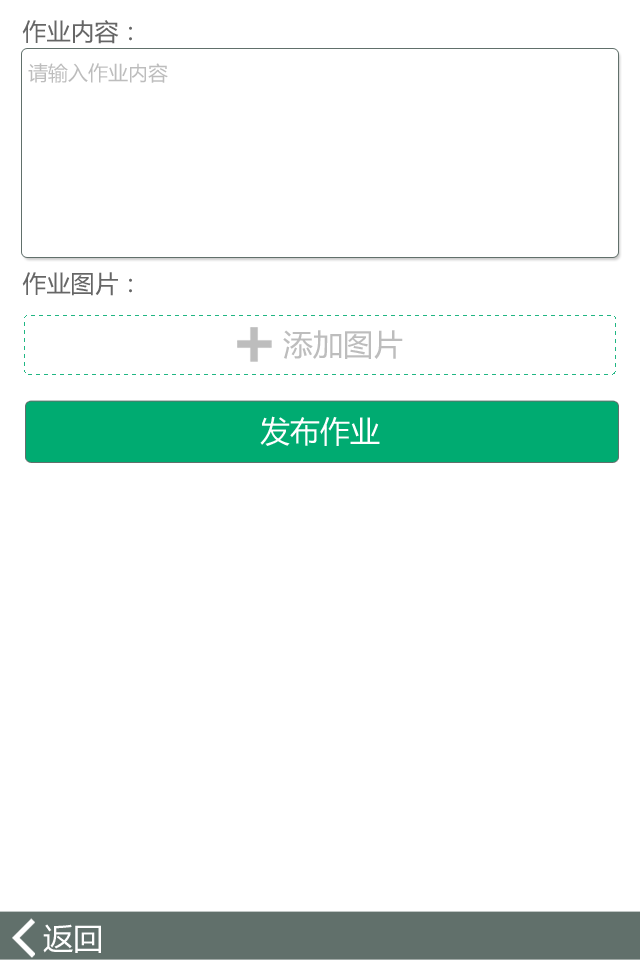
<style>
.page{position:relative;width:640px;height:960px;background:#ffffff}
.page>*{position:absolute;margin:0}
.t1{font:24px "MicrosoftYaHei";color:#666666}
.t2{font:20px "MicrosoftYaHei";color:#bdbdbd}
.t3{font:30px "MicrosoftYaHei";color:#bdbdbd}
.t4{font:30px "MicrosoftYaHei";color:#ffffff}
</style>
<div class="page">
<p class="t1" style="left:22px;top:20px;width:110px;height:276px">作业内容：<br><br><br><br><br><br>作业图片：</p>
<p class="t2" style="left:28px;top:63px;width:140px;height:20px">请输入作业内容</p>
<p class="t3" style="left:283px;top:330px;width:120px;height:29px">添加图片</p>
<p class="t4" style="left:260px;top:416px;width:120px;height:30px">发布作业</p>
<p class="t4" style="left:43px;top:924px;width:58px;height:29px">返回</p>
</div>
